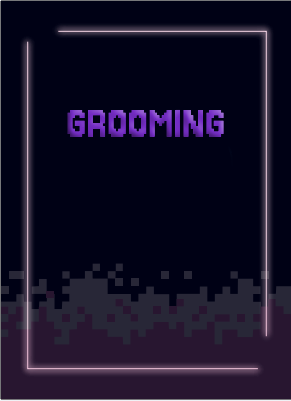
<style>
.page{position:relative;width:291px;height:401px;background:#000115}
.page>*{position:absolute;margin:0}
.t1{font:50px "Jersey10-Regular";letter-spacing:0.025em;scale:0.9 1}
</style>
<div class="page">
<p class="t1" style="left:67px;top:109px;width:157px;height:28px">GROOMING</p>
</div>
